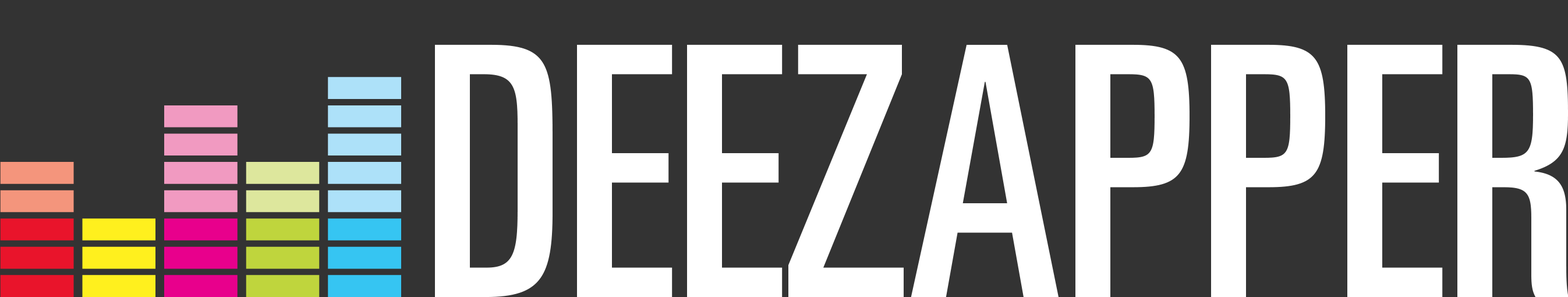
<style>
.page{position:relative;width:1568px;height:297px;background:#333333}
.page>*{position:absolute;margin:0}
.t1{font:349.4px "UniversLTStd-UltraCn";color:#ffffff}
</style>
<div class="page">
<p class="t1" style="left:435px;top:44px;width:1134px;height:254px">DEEZAPPER</p>
</div>
